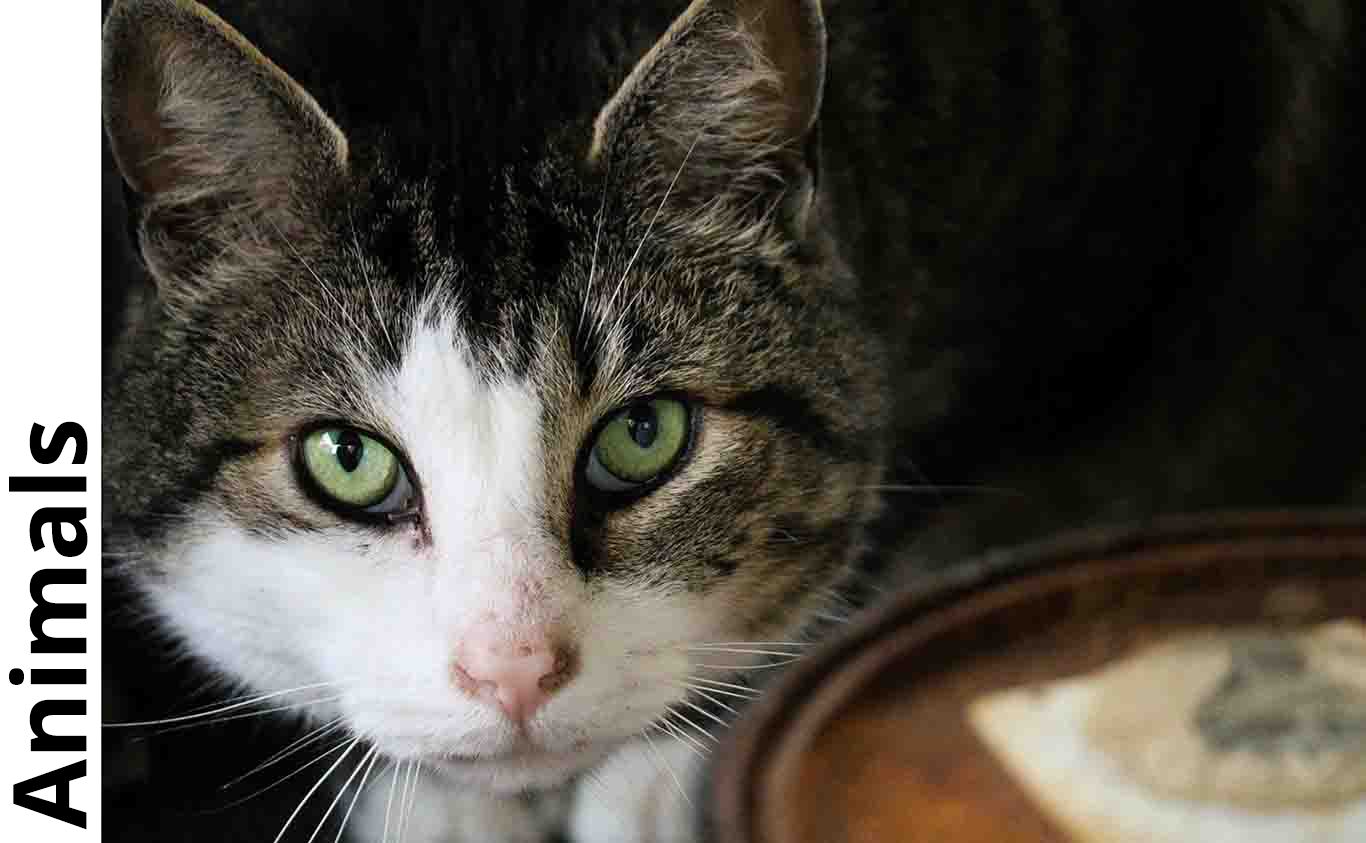
<style>
.page{position:relative;width:1366px;height:843px}
.page>*{position:absolute;margin:0}
.t1{font:101.8px "OpenSans-Bold";color:#000000}
</style>
<div class="page">
<p class="t1" style="left:9px;top:421px;width:79px;height:409px;rotate:-90deg">Animals</p>
</div>
